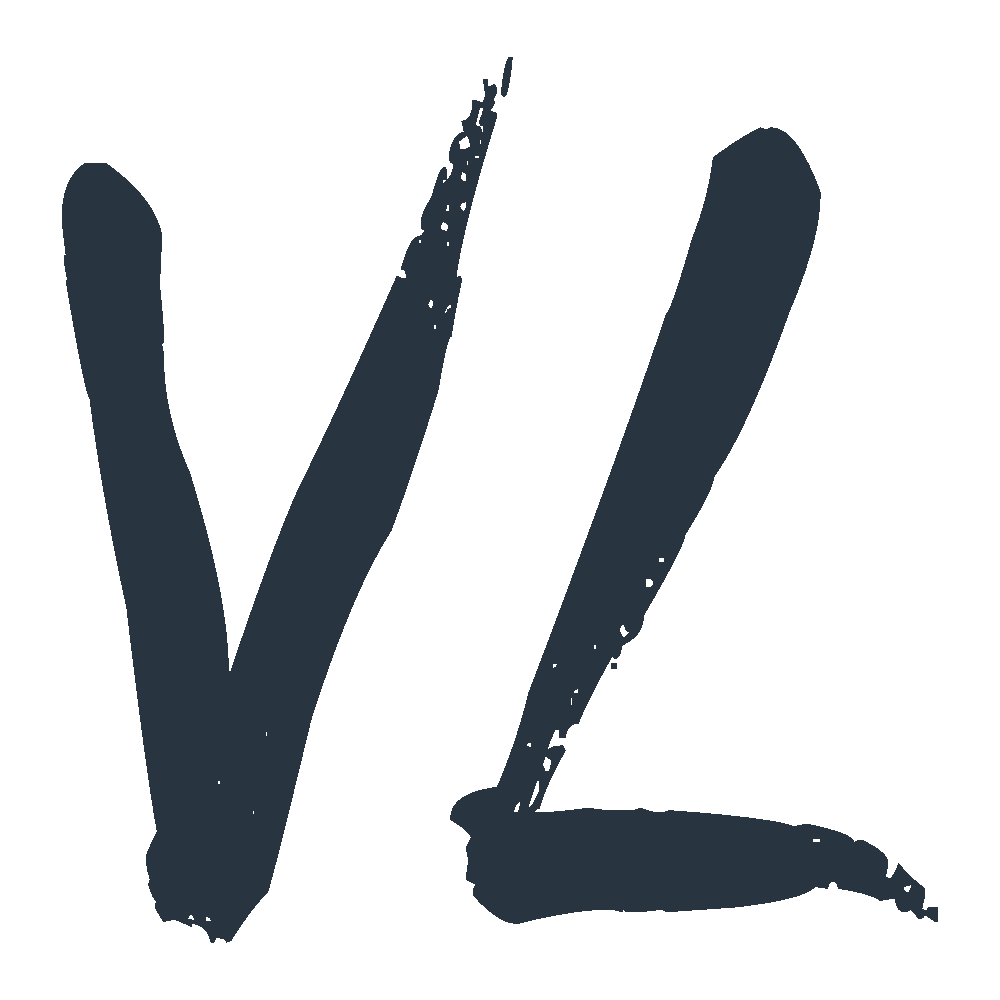
<style>
.page{position:relative;width:1000px;height:1000px;background:#ffffff}
.page>*{position:absolute;margin:0}
.t1{font:1061px "Painted";letter-spacing:-0.1em;color:#283540}
</style>
<div class="page">
<p class="t1" style="left:62px;top:57px;width:876px;height:886px">VL</p>
</div>
